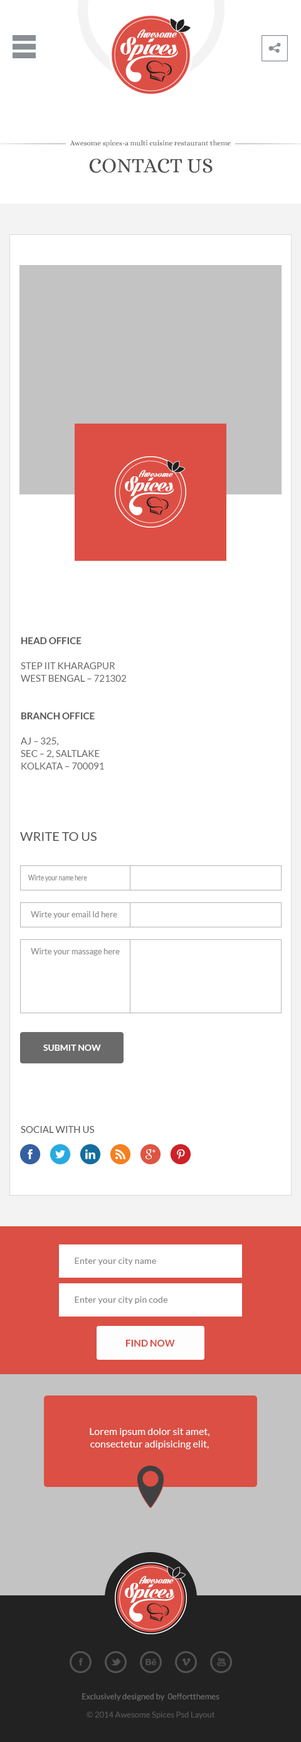
<style>
.page{position:relative;width:301px;height:1742px;background:#ffffff}
.page>*{position:absolute;margin:0}
.t1{font:7.1px "Alice-Regular";color:#505050}
.t2{font:20.9px "Alice-Regular";color:#505050;text-transform:uppercase}
.t3{font:9.4px/12.5px "Lato-Regular";color:#666666;text-transform:uppercase}
.t4{font:9.4px/12.5px "Lato-Bold";color:#555555;text-transform:uppercase}
.t5{font:12.5px "Lato-Regular";color:#555555;text-transform:uppercase}
.t6{font:8.1px "Lato-Regular";color:#8e8e8e;scale:0.75 1}
.t7{font:8.1px "Lato-Regular";color:#8e8e8e}
.t8{font:8.8px "Lato-Bold";color:#ffffff;text-transform:uppercase}
.t9{font:9.4px "Lato-Regular";color:#555555;text-transform:uppercase}
.t10{font:9px "Lato-Regular";color:#888888}
.t11{font:9.5px "Lato-Bold";color:#db4f44;text-transform:uppercase}
.t12{font:10px/12.5px "Lato-Regular";color:#ffffff}
.t13{font:8.1px "Lato-Regular";color:#737373}
.t14{font:8.1px "Lato-Regular";color:#5a5a5a}
</style>
<div class="page">
<p class="t1" style="left:70px;top:140px;width:161px;height:7px">Awesome spices-a multi cuisine restaurant theme</p>
<p class="t2" style="left:89px;top:159px;width:123px;height:14px">contact us</p>
<p class="t3" style="left:21px;top:637px;width:106px;height:133px"><span class="t4">Head Office<br></span> <br>STEP IIT KHARAGPUR<br>WEST BENGAL – 721302<br><br><br><span class="t4">Branch Office<br></span> <br>AJ – 325,<br>SEC – 2, SALTLAKE<br>KOLKATA – 700091</p>
<p class="t5" style="left:20px;top:832px;width:77px;height:9px">Write to us</p>
<p class="t6" style="left:28px;top:875px;width:59px;height:7px">Wirte your name here</p>
<p class="t7" style="left:31px;top:911px;width:86px;height:8px">Wirte your email Id here</p>
<p class="t7" style="left:31px;top:948px;width:89px;height:8px">Wirte your massage here</p>
<p class="t8" style="left:43px;top:1045px;width:58px;height:6px">submit now</p>
<p class="t9" style="left:21px;top:1126px;width:73px;height:7px">Social with us</p>
<p class="t10" style="left:75px;top:1258px;width:81px;height:7px">Enter your city name</p>
<p class="t10" style="left:75px;top:1297px;width:93px;height:7px">Enter your city pin code</p>
<p class="t11" style="left:126px;top:1340px;width:49px;height:7px">find Now</p>
<p class="t12" style="left:90px;top:1428px;width:119px;height:21px;text-align:center">Lorem ipsum dolor sit amet, consectetur adipisicing elit,</p>
<p class="t13" style="left:82px;top:1693px;width:137px;height:8px">Exclusively designed by  0effortthemes</p>
<p class="t14" style="left:86px;top:1711px;width:129px;height:9px">© 2014 Awesome Spices Psd Layout</p>
</div>
